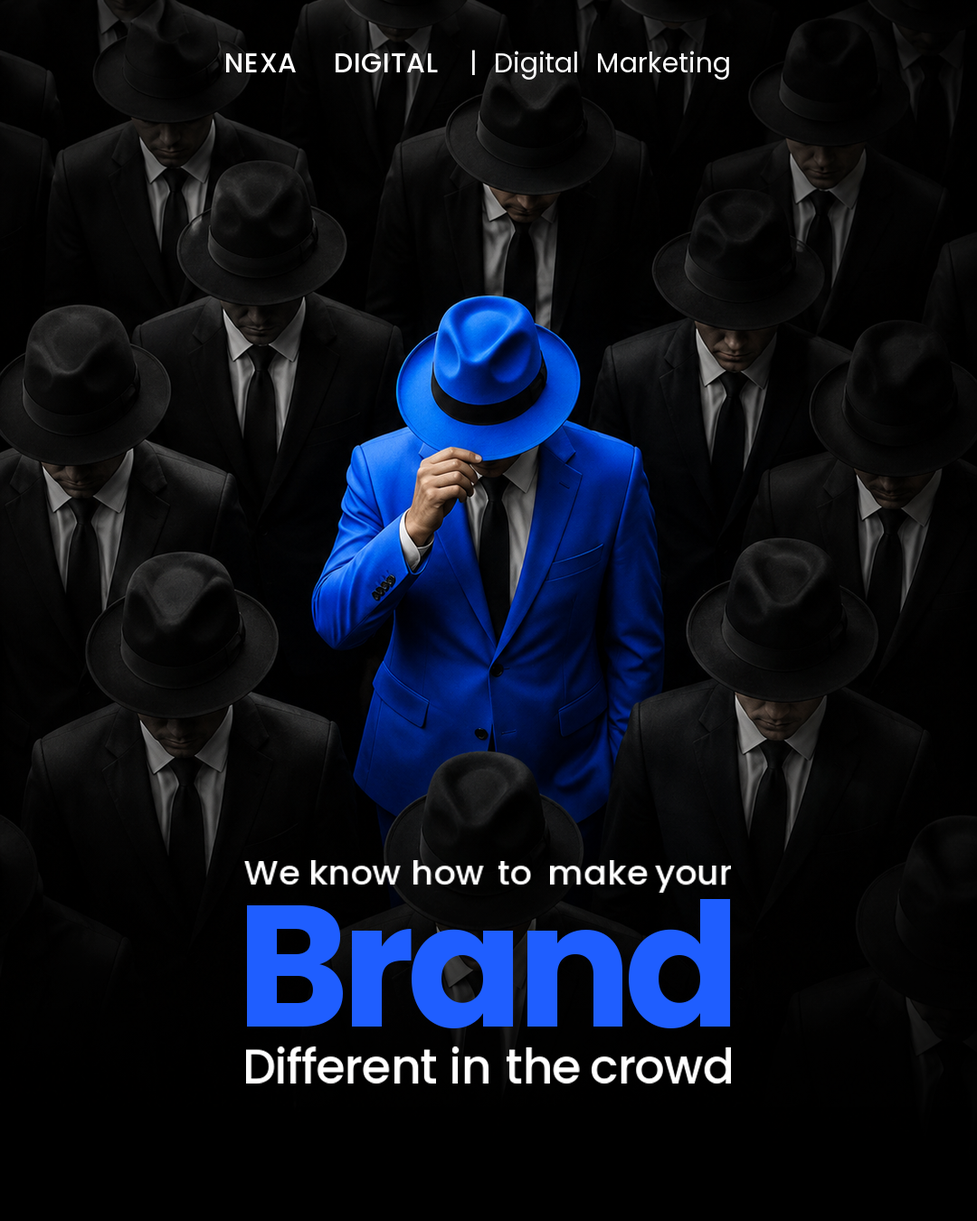
<style>
.page{position:relative;width:977px;height:1221px}
.page>*{position:absolute;margin:0}
.t1{font:27.1px "Poppins-Medium";letter-spacing:0.02em;color:#ffffff}
.t2{font:27.1px "Poppins-Regular";color:#ffffff}
.t3{font:34.5px "Poppins-Medium";color:#ffffff}
.t4{font:171.8px "Poppins-Bold";letter-spacing:-0.045em;color:#1f5eff}
.t5{font:47.5px "Poppins-Medium";letter-spacing:-0.02em;color:#ffffff}
</style>
<div class="page">
<p class="t1" style="left:226px;top:53px;width:70px;height:19px">NEXA</p>
<p class="t1" style="left:336px;top:53px;width:102px;height:19px">DIGITAL</p>
<p class="t2" style="left:472px;top:50px;width:3px;height:25px">|</p>
<p class="t2" style="left:496px;top:51px;width:81px;height:29px">Digital</p>
<p class="t2" style="left:598px;top:51px;width:131px;height:29px">Marketing</p>
<p class="t3" style="left:244px;top:861px;width:55px;height:23px">We</p>
<p class="t3" style="left:311px;top:860px;width:90px;height:24px">know</p>
<p class="t3" style="left:413px;top:860px;width:71px;height:24px">how</p>
<p class="t3" style="left:498px;top:861px;width:33px;height:23px">to</p>
<p class="t3" style="left:550px;top:860px;width:98px;height:24px">make</p>
<p class="t3" style="left:655px;top:865px;width:76px;height:28px">your</p>
<p class="t4" style="left:247px;top:899px;width:484px;height:129px">Brand</p>
<p class="t5" style="left:246px;top:1046px;width:190px;height:37px">Different</p>
<p class="t5" style="left:452px;top:1046px;width:36px;height:37px">in</p>
<p class="t5" style="left:506px;top:1047px;width:74px;height:36px">the</p>
<p class="t5" style="left:591px;top:1047px;width:140px;height:36px">crowd</p>
</div>
